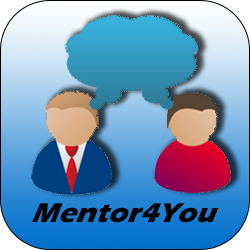
<style>
.page{position:relative;width:250px;height:250px}
.page>*{position:absolute;margin:0}
.t1{font:29.7px "ErasITC-Bold";letter-spacing:0.005em;color:#000000}
</style>
<div class="page">
<p class="t1" style="left:32px;top:203px;width:187px;height:20px">Mentor4You</p>
</div>
